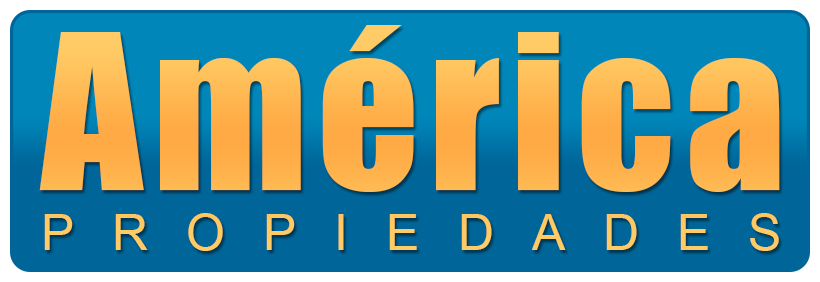
<style>
.page{position:relative;width:820px;height:282px;background:#006699}
.page>*{position:absolute;margin:0}
.t1{font:50px/60px "ArialMT";letter-spacing:0.759em;color:#ffcc66}
.t2{font:200px "Impact";letter-spacing:0.05em;color:#ffcc66}
</style>
<div class="page">
<p class="t1" style="left:39px;top:25px;width:741px;height:226px"><span class="t2">América<br></span>PROPIEDADES</p>
</div>
